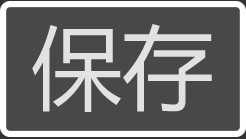
<style>
.page{position:relative;width:246px;height:139px;background:#484848}
.page>*{position:absolute;margin:0}
.t1{font:90.6px "MicrosoftYaHei";color:#e2e2e2}
</style>
<div class="page">
<p class="t1" style="left:32px;top:24px;width:180px;height:88px">保存</p>
</div>
